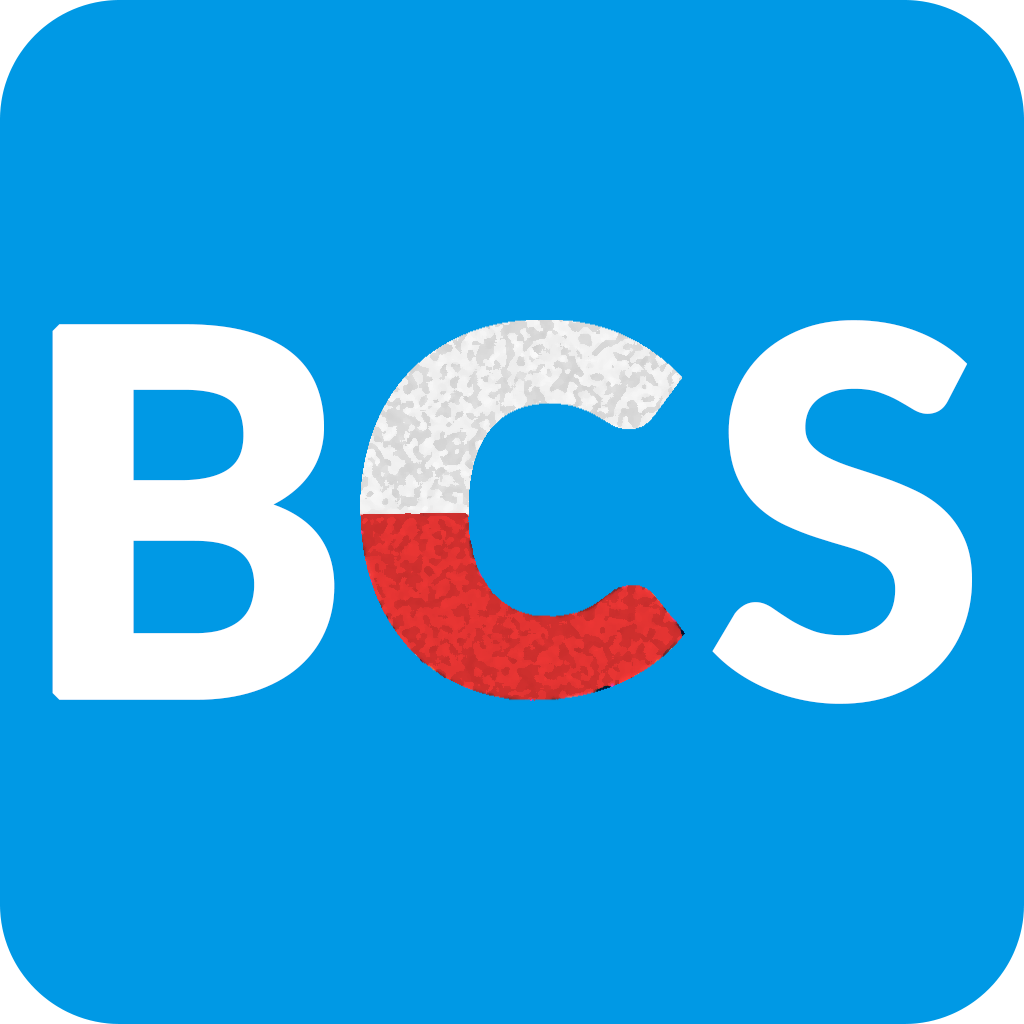
<style>
.page{position:relative;width:1024px;height:1024px;background:#0099e5}
.page>*{position:absolute;margin:0}
.t1{font:500px "Lato-Bold";letter-spacing:0.01em;color:#ffffff;font-weight:bold}
</style>
<div class="page">
<p class="t1" style="left:52px;top:320px;width:920px;height:384px">B   S</p>
</div>
